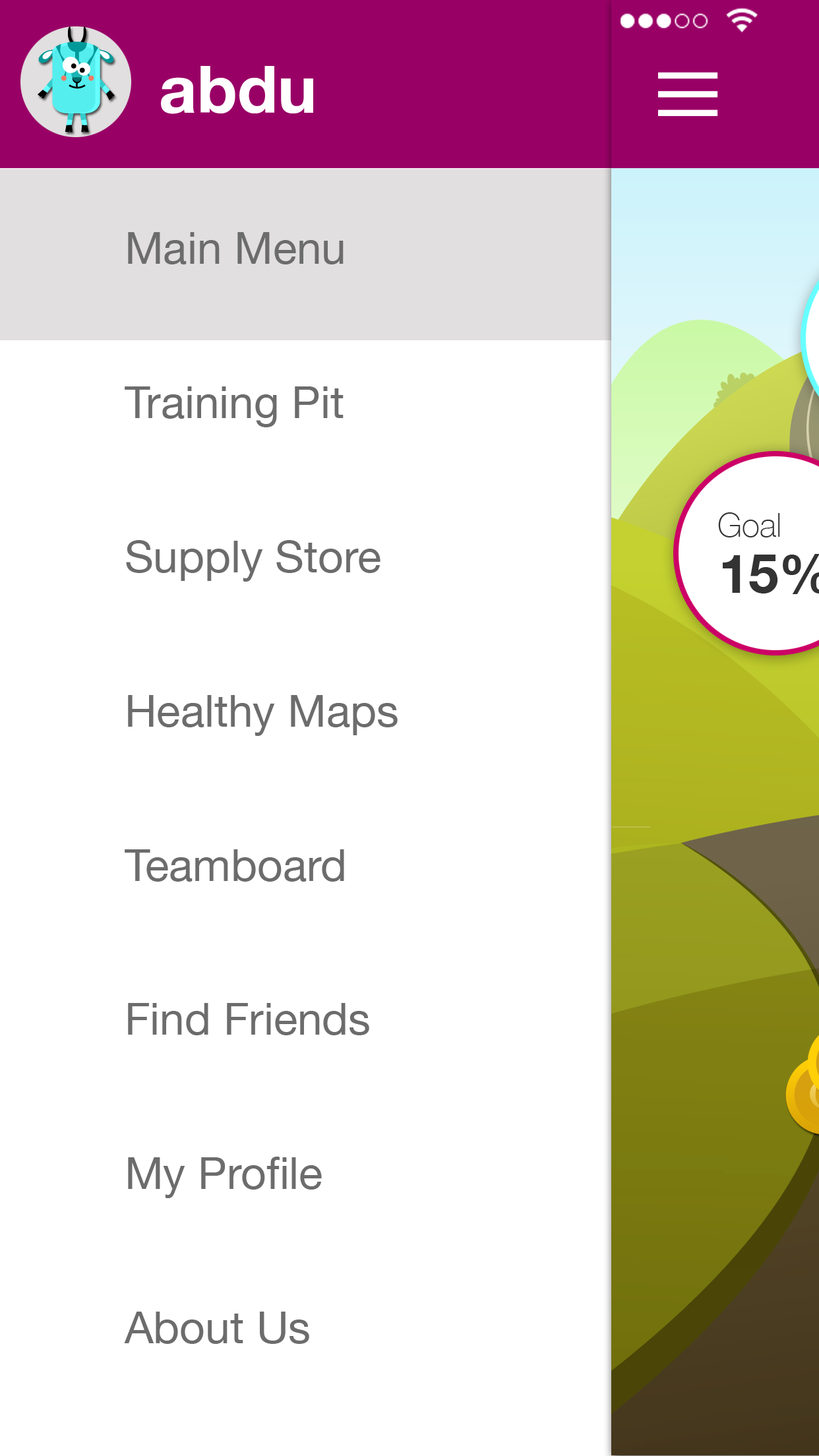
<style>
.page{position:relative;width:819px;height:1456px;background:#ffffff}
.page>*{position:absolute;margin:0}
.t1{font:66.1px "HelveticaNeue-Bold";color:#ffffff}
.t2{font:44.5px/154.2px "HelveticaNeue";color:#6c6c6c}
</style>
<div class="page">
<p class="t1" style="left:161px;top:66px;width:152px;height:48px">abdu</p>
<p class="t2" style="left:124px;top:232px;width:274px;height:1112px">Main Menu<br>Training Pit<br>Supply Store<br>Healthy Maps<br>Teamboard<br>Find Friends<br>My Profile<br>About Us</p>
</div>
